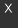
<style>
.page{position:relative;width:18px;height:28px;background:#333333}
.page>*{position:absolute;margin:0}
.t1{font:12.2px "ArialMT";color:#ffffff}
</style>
<div class="page">
<p class="t1" style="left:4px;top:3px;width:9px;height:10px">X</p>
</div>
